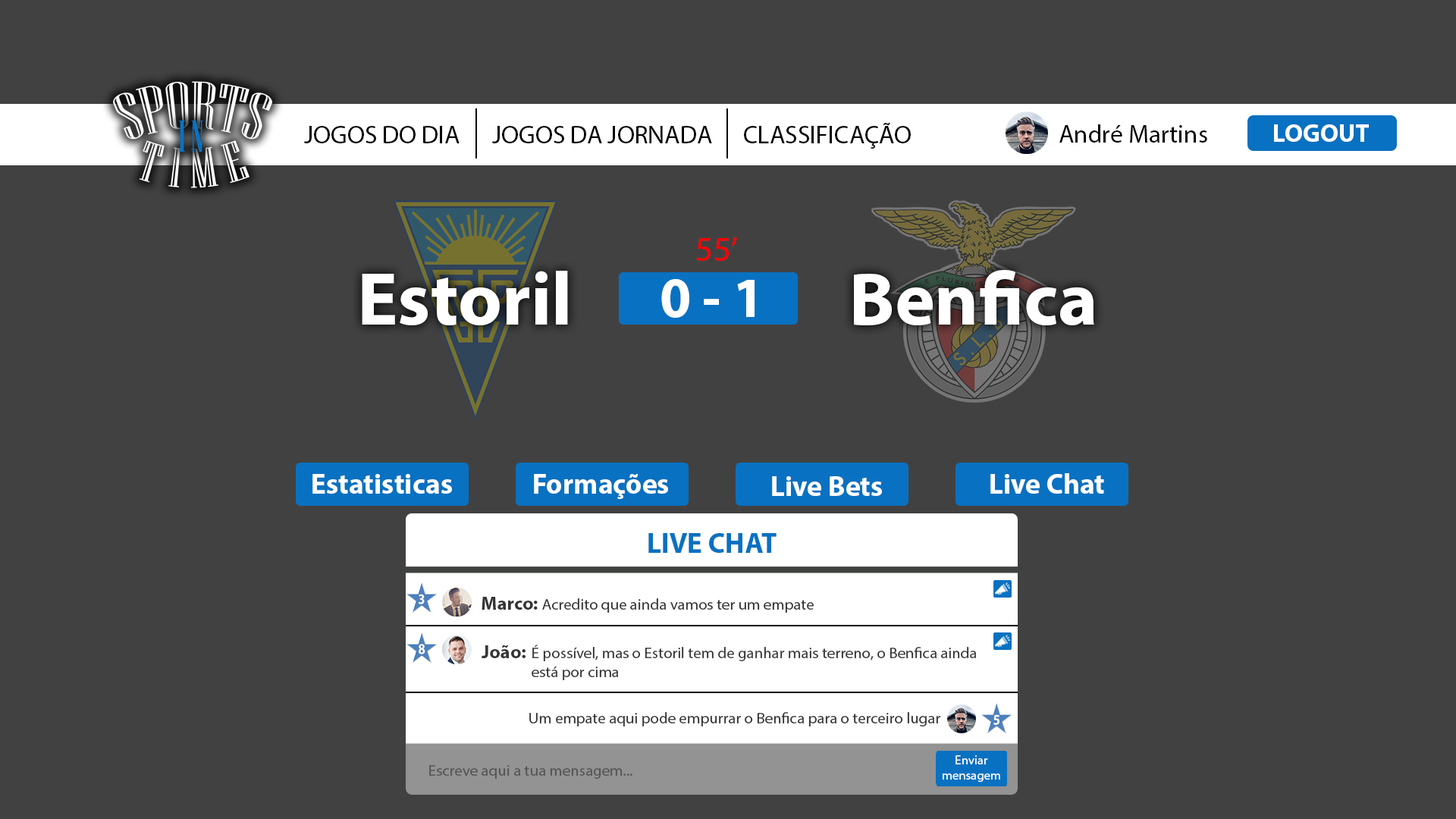
<style>
.page{position:relative;width:1456px;height:819px;background:#424141}
.page>*{position:absolute;margin:0}
.t1{font:25.3px "MyriadPro-Regular";color:#000000}
.t2{font:34.8px "MyriadPro-Regular";color:#ff0000}
.t3{font:75.8px "MyriadPro-Bold";color:#ffffff}
.t4{font:56.9px "MyriadPro-Bold";color:#ffffff}
.t5{font:28.4px "MyriadPro-Bold";color:#ffffff}
.t6{font:28.4px "MyriadPro-Bold";color:#0971c1}
.t7{font:19px "MyriadPro-Bold";color:#353535}
.t8{font:15.8px "MyriadPro-Regular";color:#353535}
.t9{font:12.6px "MyriadPro-Regular";color:#ffffff}
.t10{font:15.8px "MyriadPro-Regular";color:#555555}
</style>
<div class="page">
<p class="t1" style="left:304px;top:126px;width:156px;height:17px">JOGOS DO DIA</p>
<p class="t1" style="left:492px;top:126px;width:220px;height:17px">JOGOS DA JORNADA</p>
<p class="t1" style="left:744px;top:122px;width:167px;height:27px">CLASSIFICAÇÃO</p>
<p class="t1" style="left:1059px;top:124px;width:148px;height:19px">André Martins</p>
<p class="t2" style="left:696px;top:237px;width:41px;height:24px">55’</p>
<p class="t3" style="left:854px;top:270px;width:240px;height:55px">Benfica</p>
<p class="t3" style="left:362px;top:271px;width:206px;height:54px">Estoril</p>
<p class="t4" style="left:661px;top:279px;width:94px;height:39px">0 - 1</p>
<p class="t5" style="left:312px;top:474px;width:140px;height:20px">Estatisticas</p>
<p class="t5" style="left:534px;top:474px;width:134px;height:25px">Formações</p>
<p class="t5" style="left:990px;top:473px;width:114px;height:21px">Live Chat</p>
<p class="t5" style="left:772px;top:476px;width:110px;height:20px">Live Bets</p>
<p class="t6" style="left:648px;top:533px;width:129px;height:20px">LIVE CHAT</p>
<p class="t7" style="left:482px;top:597px;width:56px;height:13px">Marco:</p>
<p class="t8" style="left:542px;top:598px;width:272px;height:15px">Acredito que ainda vamos ter um empate</p>
<p class="t7" style="left:482px;top:645px;width:44px;height:13px">João:</p>
<p class="t8" style="left:532px;top:645px;width:445px;height:35px">É possível, mas o Estoril tem de ganhar mais terreno, o Benfica ainda <br>está por cima</p>
<p class="t8" style="left:529px;top:712px;width:412px;height:14px">Um empate aqui pode empurrar o Benfica para o terceiro lugar</p>
<p class="t9" style="left:943px;top:755px;width:57px;height:27px;text-align:center">Enviar<br>mensagem</p>
<p class="t10" style="left:429px;top:765px;width:203px;height:14px">Escreve aqui a tua mensagem...</p>
</div>
